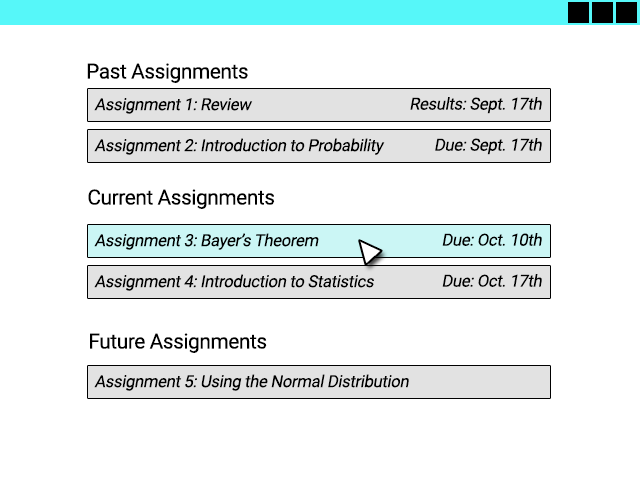
<style>
.page{position:relative;width:640px;height:480px;background:#ffffff}
.page>*{position:absolute;margin:0}
.t1{font:20.8px "Roboto-Regular";letter-spacing:-0.02em;color:#000000}
.t2{font:16.7px "Roboto-Regular";letter-spacing:-0.02em;color:#000000;font-style:italic}
</style>
<div class="page">
<p class="t1" style="left:87px;top:63px;width:161px;height:20px">Past Assignments</p>
<p class="t2" style="left:94px;top:98px;width:159px;height:16px">Assignment 1: Review</p>
<p class="t2" style="left:410px;top:97px;width:132px;height:17px">Results: Sept. 17th</p>
<p class="t2" style="left:94px;top:138px;width:291px;height:17px">Assignment 2: Introduction to Probability</p>
<p class="t2" style="left:435px;top:138px;width:107px;height:17px">Due: Sept. 17th</p>
<p class="t1" style="left:88px;top:189px;width:187px;height:20px">Current Assignments</p>
<p class="t2" style="left:94px;top:233px;width:225px;height:17px">Assignment 3: Bayer’s Theorem</p>
<p class="t2" style="left:442px;top:233px;width:100px;height:13px">Due: Oct. 10th</p>
<p class="t2" style="left:94px;top:274px;width:280px;height:17px">Assignment 4: Introduction to Statistics</p>
<p class="t2" style="left:442px;top:274px;width:100px;height:13px">Due: Oct. 17th</p>
<p class="t1" style="left:90px;top:333px;width:177px;height:20px">Future Assignments</p>
<p class="t2" style="left:94px;top:374px;width:315px;height:17px">Assignment 5: Using the Normal Distribution</p>
</div>
